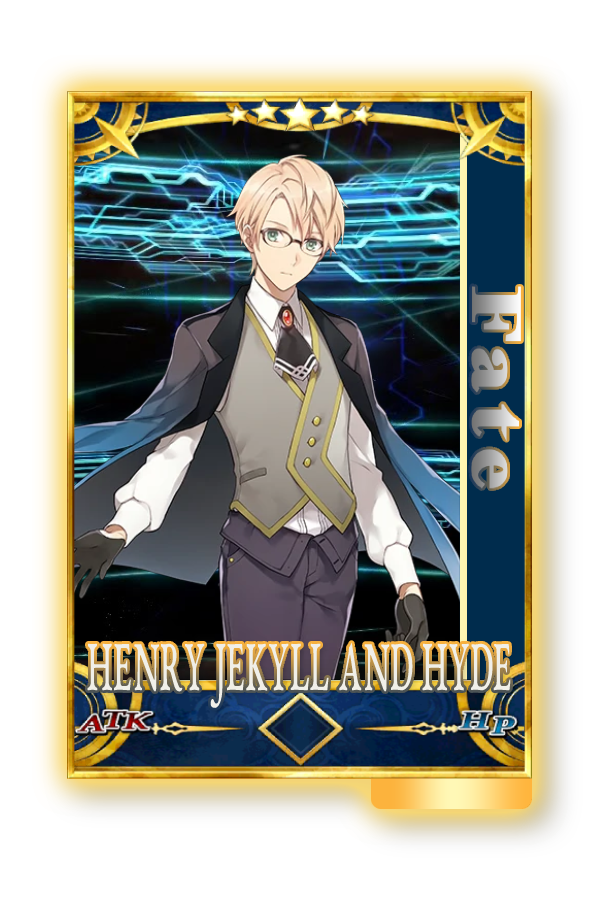
<style>
.page{position:relative;width:600px;height:900px;background:#ffffff}
.page>*{position:absolute;margin:0}
.t1{font:102.2px "EBGaramond12-AllSC";color:#f0efe8;scale:0.43 1}
</style>
<div class="page">
<p class="t1" style="left:87px;top:642px;width:424px;height:66px">henry jekyll and hyde</p>
</div>
